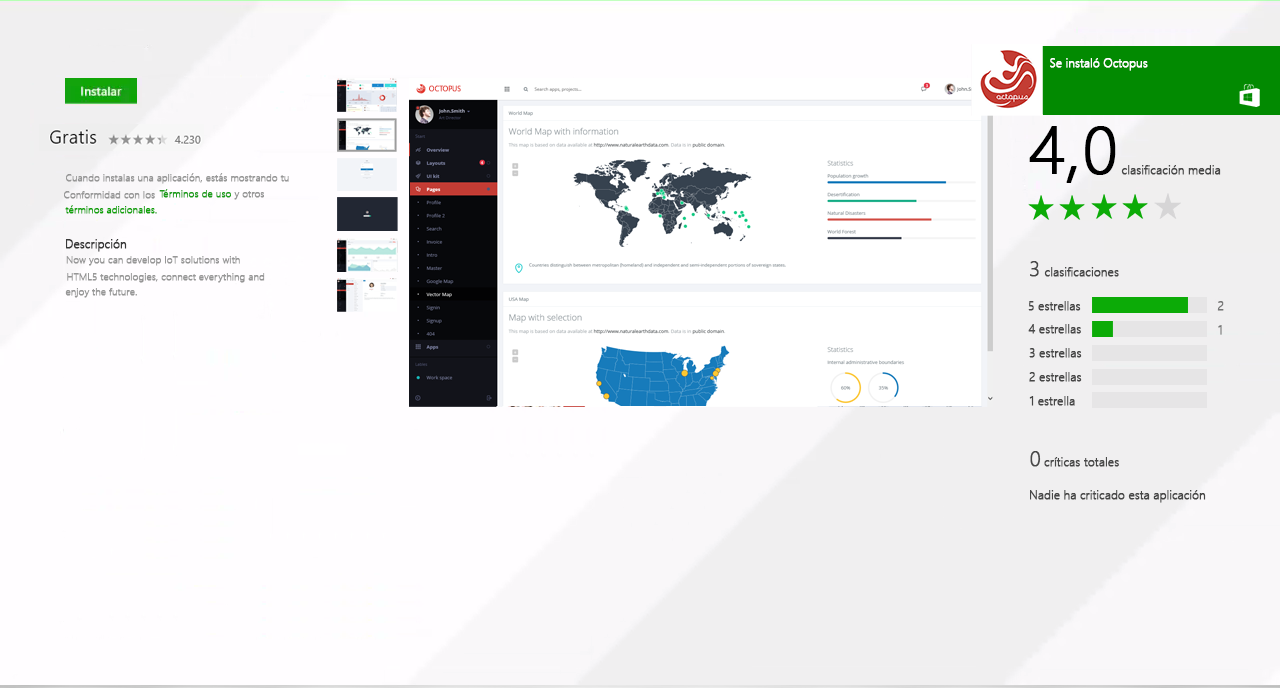
<style>
.page{position:relative;width:1280px;height:688px;background:#fffdff}
.page>*{position:absolute;margin:0}
.t1{font:11.9px "SegoeUI-Light";color:#ffffff;font-weight:bold}
.t2{font:7.2px "SegoeUI-Light";color:#e34139;font-weight:bold}
.t3{font:66.7px "SegoeUI-Light";color:#000000;font-weight:bold}
.t4{font:9.9px "SegoeUI-Light";color:#979797;font-weight:bold}
.t5{font:12px "SegoeUI-Light";color:#474747;font-weight:bold}
.t6{font:10px "SegoeUI-Light";color:#1b9f19;font-weight:bold}
.t7{font:9.9px "SegoeUI-Light";color:#12a30a;font-weight:bold}
.t8{font:12px "SegoeUI-Light";color:#383838;font-weight:bold}
.t9{font:21.3px "SegoeUI-Light";color:#474747;font-weight:bold}
.t10{font:11.9px "SegoeUI-Light";color:#767676;font-weight:bold}
.t11{font:11.9px "SegoeUI-Light";color:#474747;font-weight:bold}
</style>
<div class="page">
<p class="t1" style="left:1050px;top:58px;width:98px;height:13px">Se instaló Octopus</p>
<p class="t2" style="left:429px;top:85px;width:32px;height:7px">OCTOPUS</p>
<p class="t3" style="left:1029px;top:126px;width:87px;height:57px">4,0</p>
<p class="t4" style="left:66px;top:173px;width:223px;height:11px">Cuando instalas una aplicación, estás mostrando tu</p>
<p class="t5" style="left:1121px;top:165px;width:100px;height:10px">clasificación media</p>
<p class="t4" style="left:64px;top:191px;width:91px;height:8px">Conformidad con los</p>
<p class="t6" style="left:159px;top:189px;width:72px;height:9px">Términos de uso</p>
<p class="t4" style="left:234px;top:191px;width:30px;height:9px">y otros</p>
<p class="t7" style="left:65px;top:205px;width:92px;height:9px">términos adicionales.</p>
<p class="t8" style="left:66px;top:239px;width:61px;height:13px">Descripción</p>
<p class="t4" style="left:66px;top:256px;width:174px;height:10px">Now you can develop IoT solutions with</p>
<p class="t9" style="left:1030px;top:261px;width:9px;height:16px">3</p>
<p class="t5" style="left:1044px;top:267px;width:75px;height:10px">clasificaciones</p>
<p class="t4" style="left:67px;top:273px;width:198px;height:10px">HTML5 technologies, connect everything and</p>
<p class="t4" style="left:65px;top:288px;width:72px;height:10px">enjoy the future.</p>
<p class="t5" style="left:1028px;top:301px;width:53px;height:10px">5 estrellas</p>
<p class="t10" style="left:1217px;top:301px;width:7px;height:10px">2</p>
<p class="t5" style="left:1028px;top:324px;width:53px;height:10px">4 estrellas</p>
<p class="t10" style="left:1218px;top:325px;width:4px;height:10px">1</p>
<p class="t5" style="left:1029px;top:348px;width:53px;height:10px">3 estrellas</p>
<p class="t5" style="left:1029px;top:372px;width:53px;height:10px">2 estrellas</p>
<p class="t5" style="left:1029px;top:396px;width:46px;height:10px">1 estrella</p>
<p class="t9" style="left:1030px;top:451px;width:11px;height:16px">0</p>
<p class="t5" style="left:1044px;top:457px;width:75px;height:10px">críticas totales</p>
<p class="t11" style="left:1030px;top:490px;width:176px;height:13px">Nadie ha criticado esta aplicación</p>
</div>
